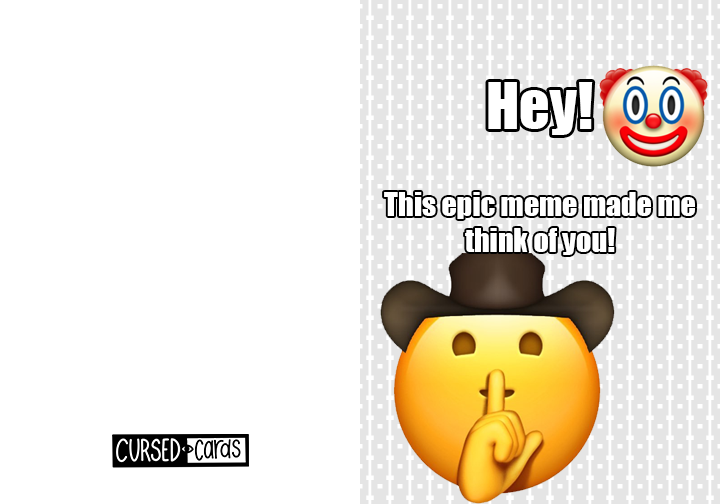
<style>
.page{position:relative;width:720px;height:504px;background:#ffffff}
.page>*{position:absolute;margin:0}
.t1{font:60px "Impact";color:#ffffff}
.t2{font:30px "Impact";color:#ffffff}
</style>
<div class="page">
<p class="t1" style="left:488px;top:82px;width:105px;height:53px">Hey!</p>
<p class="t2" style="left:384px;top:192px;width:311px;height:63px;text-align:center">This epic meme made me think of you!</p>
</div>
